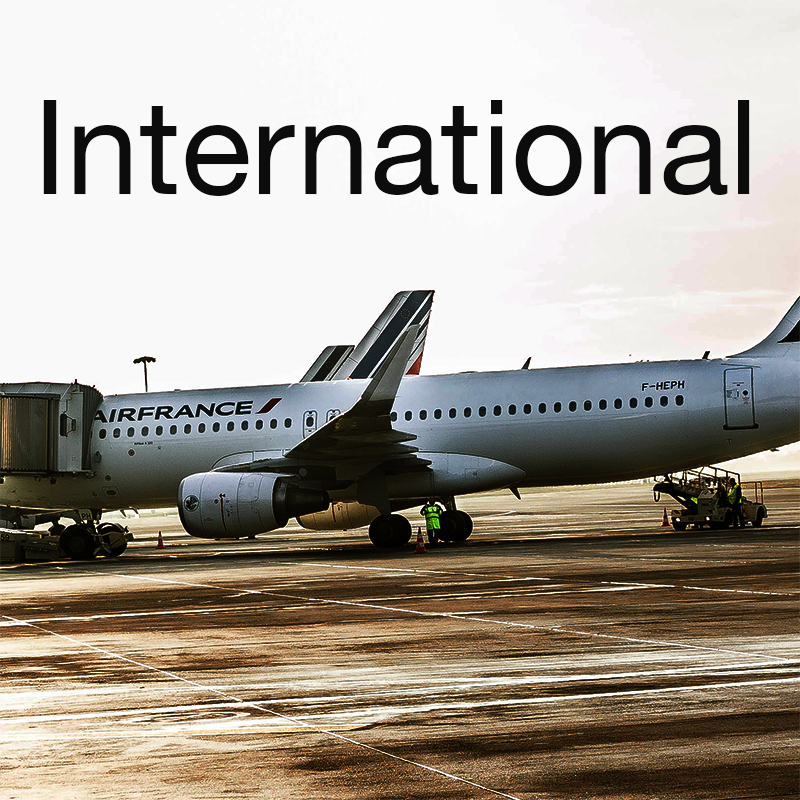
<style>
.page{position:relative;width:800px;height:800px;background:#f9f9f9}
.page>*{position:absolute;margin:0}
.t1{font:131.1px "HelveticaNeue";color:#0d0c0c}
</style>
<div class="page">
<p class="t1" style="left:43px;top:100px;width:707px;height:96px">International</p>
</div>
